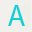
<style>
.page{position:relative;width:32px;height:32px;background:#f1f0ec}
.page>*{position:absolute;margin:0}
.t1{font:30px "MyriadPro-Regular";color:#12cfd6}
</style>
<div class="page">
<p class="t1" style="left:8px;top:5px;width:17px;height:21px">A</p>
</div>
